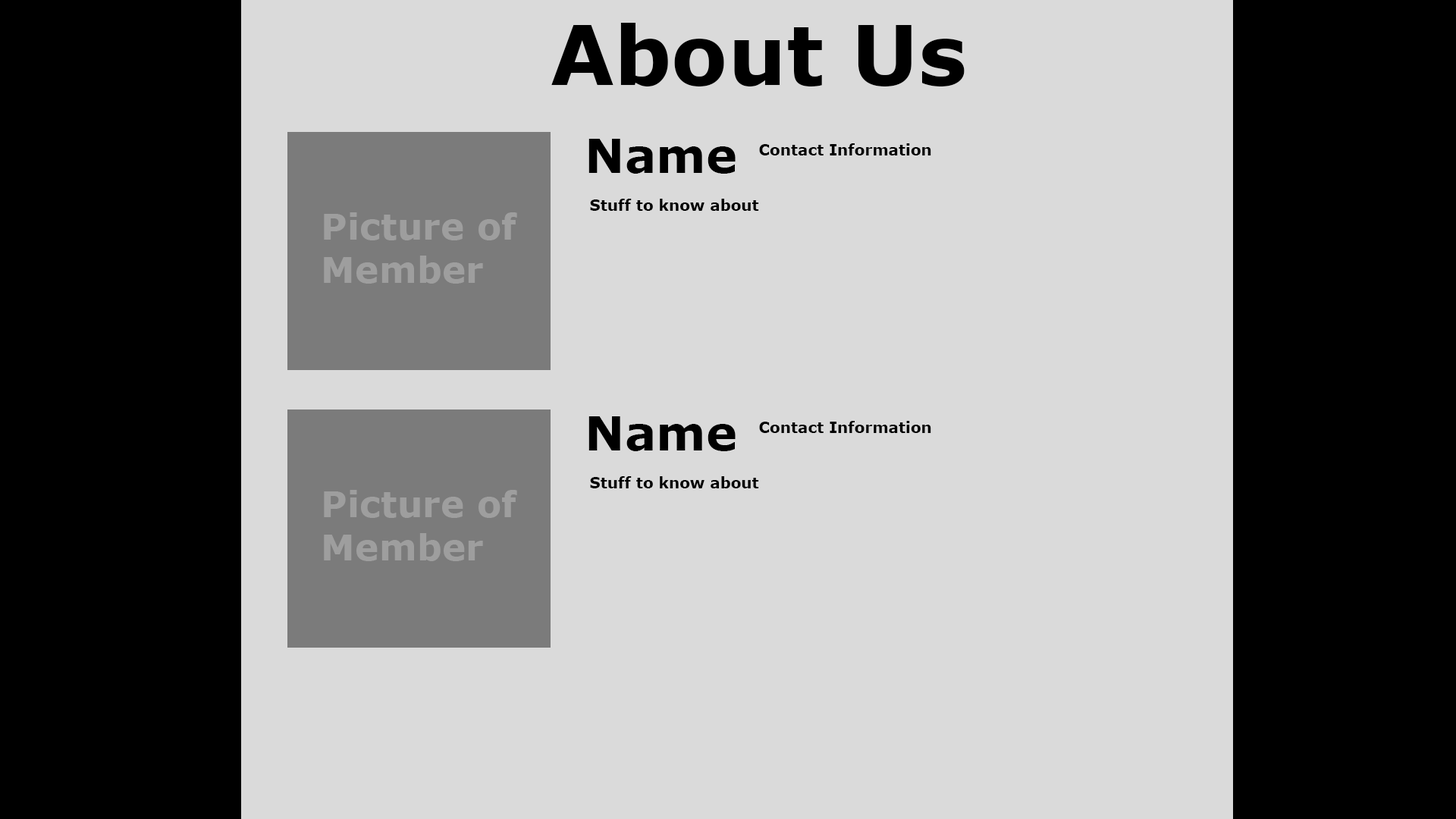
<style>
.page{position:relative;width:1456px;height:819px;background:#dadada}
.page>*{position:absolute;margin:0}
.t1{font:82.1px "Verdana-Bold";color:#000000}
.t2{font:47.1px "Verdana-Bold";color:#000000}
.t3{font:15.2px "Verdana-Bold";color:#000000}
.t4{font:35.9px "Verdana-Bold";color:#9e9e9e}
</style>
<div class="page">
<p class="t1" style="left:551px;top:23px;width:414px;height:63px">About Us</p>
<p class="t2" style="left:588px;top:139px;width:148px;height:35px">Name</p>
<p class="t3" style="left:759px;top:143px;width:172px;height:12px">Contact Information</p>
<p class="t3" style="left:590px;top:199px;width:169px;height:12px">Stuff to know about</p>
<p class="t4" style="left:324px;top:212px;width:193px;height:72px">Picture of<br>Member</p>
<p class="t2" style="left:588px;top:416px;width:148px;height:35px">Name</p>
<p class="t3" style="left:759px;top:421px;width:172px;height:12px">Contact Information</p>
<p class="t3" style="left:590px;top:476px;width:169px;height:12px">Stuff to know about</p>
<p class="t4" style="left:324px;top:490px;width:193px;height:71px">Picture of<br>Member</p>
</div>
